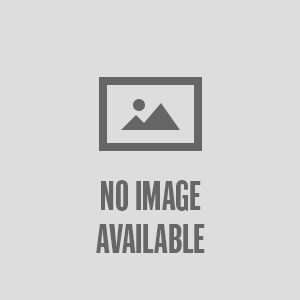
<style>
.page{position:relative;width:300px;height:300px;background:#dddddd}
.page>*{position:absolute;margin:0}
.t1{font:36.1px "IndustrialGothicSingleStd";color:#676767}
</style>
<div class="page">
<p class="t1" style="left:96px;top:180px;width:109px;height:73px;text-align:center">NO IMAGE<br>AVAILABLE</p>
</div>
